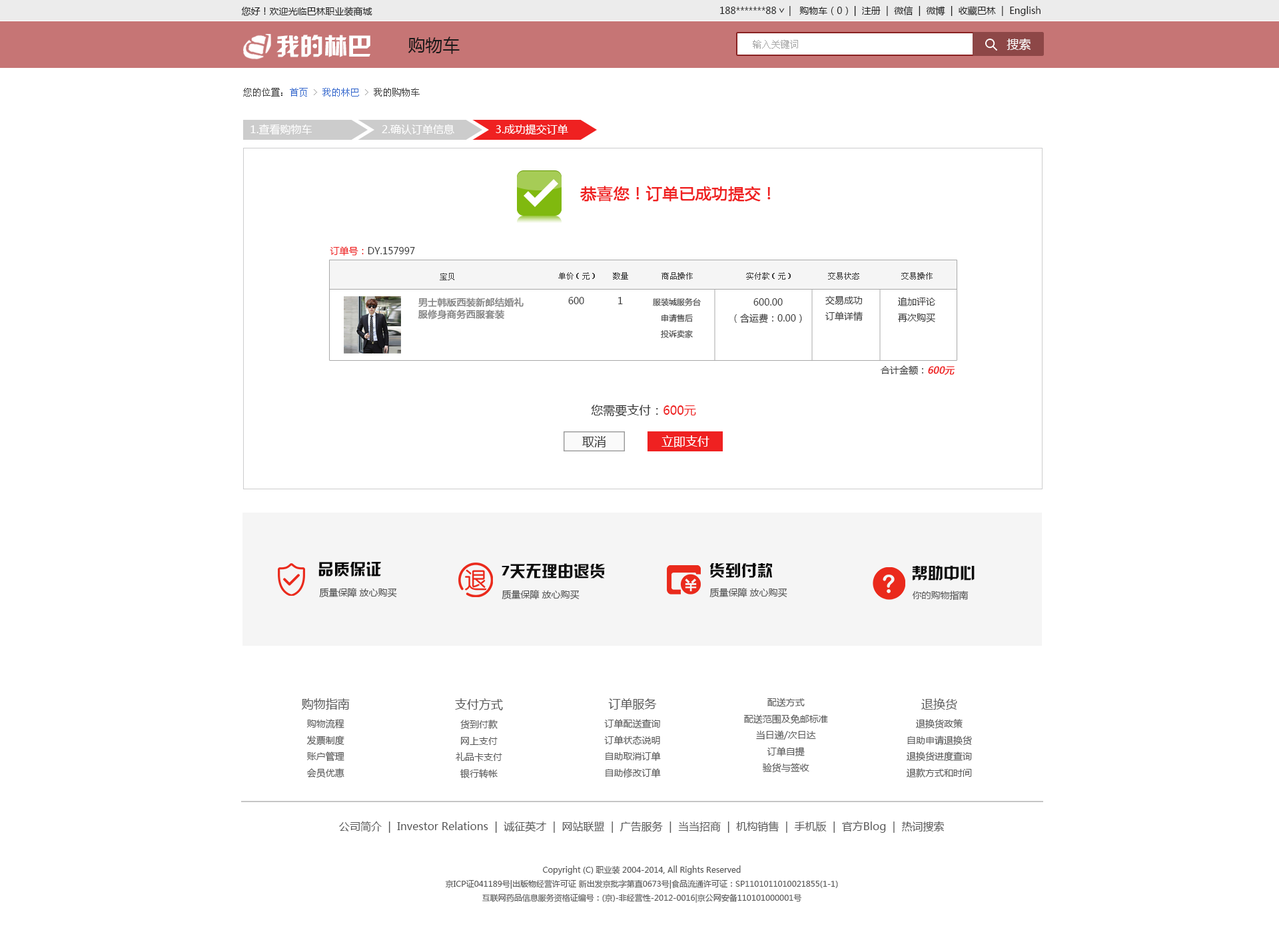
<style>
.page{position:relative;width:1279px;height:932px;background:#ffffff}
.page>*{position:absolute;margin:0}
.t1{font:9.3px "MicrosoftYaHei";color:#1e1e1e}
.t2{font:9.6px "MicrosoftYaHei";scale:0.94 1}
.t3{font:24px "HYk2gj";color:#ffffff}
.t4{font:17.3px "MicrosoftYaHei";color:#1a1919}
.t5{font:9.3px "SimSun";color:#a3a3a3}
.t6{font:12px "MicrosoftYaHei";color:#ffffff}
.t7{font:9.3px "SimSun";color:#3b3b3b}
.t8{font:9.3px "SimSun";color:#3366cc}
.t9{font:9.3px "SimSun";color:#999999}
.t10{font:9.3px "SimSun";color:#989898}
.t11{font:10.7px "MicrosoftYaHei";color:#ffffff}
.t12{font:16px "MicrosoftYaHei";color:#ef2121;font-weight:bold}
.t13{font:9.3px "MicrosoftYaHei";color:#333333}
.t14{font:9.3px "MicrosoftYaHei";color:#ef2121}
.t15{font:8px "SimSun";color:#3a3a3a}
.t16{font:9.3px/12px "MicrosoftYaHei";color:#838383;font-weight:bold}
.t17{font:9.3px "MicrosoftYaHei";color:#3a3a3a}
.t18{font:8px/16px "MicrosoftYaHei";color:#3a3a3a}
.t19{font:9.3px/16px "MicrosoftYaHei";color:#3a3a3a}
.t20{font:9.3px "MicrosoftYaHei";color:#ef2121;font-weight:bold;font-style:italic}
.t21{font:12px "MicrosoftYaHei";color:#333333}
.t22{font:12px "MicrosoftYaHei";color:#ef2121}
.t23{font:16px "HYk2gj";color:#080808}
.t24{font:16px "HYk2gj";color:#0d0d0d}
.t25{font:16px "HYk2gj";color:#090909}
.t26{font:16px "HYk2gj";color:#0b0b0b}
.t27{font:9.3px "MicrosoftYaHei";color:#4c4c4c}
.t28{font:9.3px "MicrosoftYaHei";color:#4e4e4e}
.t29{font:9.3px "MicrosoftYaHei";color:#505050}
.t30{font:9.3px "MicrosoftYaHei";color:#575757}
.t31{font:12px "MicrosoftYaHei";color:#575757}
.t32{font:10.7px "MicrosoftYaHei";color:#575757}
.t33{font:8px "MicrosoftYaHei";color:#575757}
</style>
<div class="page">
<p class="t1" style="left:720px;top:6px;width:320px;height:10px">188*******88                            |  注册  |  微信  |  微博  |  收藏巴林  |  English</p>
<p class="t1" style="left:789px;top:6px;width:59px;height:10px">|   购物车（0）</p>
<p class="t1" style="left:241px;top:7px;width:131px;height:10px">您好！欢迎光临巴林职业装商城</p>
<p class="t2" style="left:779px;top:8px;width:6px;height:5px;rotate:90deg">&gt;</p>
<p class="t3" style="left:276px;top:35px;width:94px;height:22px">我的林巴</p>
<p class="t4" style="left:408px;top:37px;width:52px;height:17px">购物车</p>
<p class="t5" style="left:753px;top:40px;width:45px;height:9px">输入关键词</p>
<p class="t6" style="left:1006px;top:38px;width:25px;height:13px">搜索</p>
<p class="t7" style="left:243px;top:88px;width:177px;height:9px">您的位置：<span class="t8">首页 </span><span class="t9">&gt; </span><span class="t8">我的林巴 </span><span class="t10">&gt;</span> 我的购物车</p>
<p class="t11" style="left:250px;top:124px;width:318px;height:11px">1.查看购物车                      2.确认订单信息             3.成功提交订单</p>
<p class="t12" style="left:580px;top:186px;width:191px;height:16px">恭喜您！订单已成功提交！</p>
<p class="t13" style="left:330px;top:246px;width:85px;height:10px"><span class="t14">订单号：</span>DY.157997</p>
<p class="t15" style="left:440px;top:273px;width:14px;height:7px">宝贝</p>
<p class="t15" style="left:558px;top:272px;width:37px;height:8px">单价（元）</p>
<p class="t15" style="left:613px;top:272px;width:15px;height:8px">数量</p>
<p class="t15" style="left:661px;top:272px;width:32px;height:8px">商品操作</p>
<p class="t15" style="left:746px;top:272px;width:45px;height:8px">实付款（元）</p>
<p class="t15" style="left:828px;top:272px;width:31px;height:8px">交易状态</p>
<p class="t15" style="left:901px;top:272px;width:31px;height:8px">交易操作</p>
<p class="t16" style="left:418px;top:298px;width:106px;height:22px">男士韩版西装新郎结婚礼<br>服修身商务西服套装</p>
<p class="t17" style="left:568px;top:297px;width:16px;height:7px">600</p>
<p class="t17" style="left:618px;top:297px;width:5px;height:7px">1</p>
<p class="t18" style="left:653px;top:298px;width:48px;height:40px;text-align:center">服装城服务台<br>申请售后<br>投诉卖家</p>
<p class="t19" style="left:734px;top:298px;width:68px;height:26px;text-align:center">600.00<br>（含运费：0.00）</p>
<p class="t19" style="left:825px;top:296px;width:38px;height:25px;text-align:center">交易成功<br>订单详情</p>
<p class="t19" style="left:898px;top:297px;width:37px;height:26px;text-align:center">追加评论<br>再次购买</p>
<p class="t13" style="left:881px;top:366px;width:73px;height:9px">合计金额：<span class="t20">600元</span></p>
<p class="t21" style="left:591px;top:404px;width:105px;height:13px">您需要支付：<span class="t22">600元</span></p>
<p class="t21" style="left:582px;top:436px;width:23px;height:12px">取消</p>
<p class="t6" style="left:661px;top:436px;width:48px;height:12px">立即支付</p>
<p class="t23" style="left:318px;top:562px;width:63px;height:15px">品质保证</p>
<p class="t24" style="left:502px;top:563px;width:103px;height:16px">7天无理由退货</p>
<p class="t25" style="left:709px;top:563px;width:63px;height:16px">货到付款</p>
<p class="t26" style="left:912px;top:565px;width:62px;height:16px">帮助中心</p>
<p class="t27" style="left:319px;top:588px;width:78px;height:10px">质量保障 放心购买</p>
<p class="t28" style="left:502px;top:590px;width:77px;height:10px">质量保障 放心购买</p>
<p class="t29" style="left:709px;top:588px;width:78px;height:10px">质量保障 放心购买</p>
<p class="t30" style="left:912px;top:591px;width:56px;height:10px">你的购物指南</p>
<p class="t30" style="left:301px;top:699px;width:49px;height:80px;text-align:center"><span class="t31">购物指南<br></span>购物流程<br>发票制度<br>账户管理<br>会员优惠</p>
<p class="t30" style="left:455px;top:699px;width:48px;height:80px;text-align:center"><span class="t31">支付方式<br></span>货到付款<br>网上支付<br>礼品卡支付<br>银行转帐</p>
<p class="t30" style="left:604px;top:699px;width:57px;height:80px;text-align:center"><span class="t31">订单服务<br></span>订单配送查询<br>订单状态说明<br>自助取消订单<br>自助修改订单</p>
<p class="t30" style="left:744px;top:698px;width:84px;height:75px;text-align:center">配送方式<br>配送范围及免邮标准<br>当日递/次日达<br>订单自提<br>验货与签收</p>
<p class="t30" style="left:906px;top:699px;width:66px;height:79px;text-align:center"><span class="t31">退换货<br></span>退换货政策<br>自助申请退换货<br>退换货进度查询<br>退款方式和时间</p>
<p class="t32" style="left:339px;top:821px;width:605px;height:12px">公司简介  |  Investor Relations  |  诚征英才  |  网站联盟  |  广告服务  |  当当招商  |  机构销售  |  手机版  |  官方Blog  |  热词搜索</p>
<p class="t33" style="left:445px;top:866px;width:393px;height:37px;text-align:center">Copyright (C) 职业装 2004-2014, All Rights Reserved<br>京ICP证041189号|出版物经营许可证 新出发京批字第直0673号|食品流通许可证：SP1101011010021855(1-1)<br>互联网药品信息服务资格证编号：(京)-非经营性-2012-0016|京公网安备110101000001号</p>
</div>
